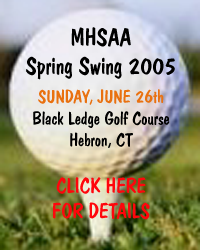
<style>
.page{position:relative;width:200px;height:250px}
.page>*{position:absolute;margin:0}
.t1{font:18px "DomCasualD-Regu";color:#000000}
.t2{font:24px "DomCasualD-Regu";color:#000000}
.t3{font:18px "DomCasualD-Regu";color:#e97110}
.t4{font:21px "DomCasualD-Regu";color:#ff060c}
</style>
<div class="page">
<p class="t1" style="left:26px;top:27px;width:149px;height:193px;text-align:center"><span class="t2">MHSAA<br>Spring Swing 2005<br><br></span><span class="t3">SUNDAY, JUNE 26th<br></span>Black Ledge Golf Course<br>Hebron, CT<br><br><span class="t4">CLICK HERE <br>FOR DETAILS</span></p>
</div>
